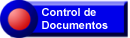
<style>
.page{position:relative;width:130px;height:38px;background:#0000ea}
.page>*{position:absolute;margin:0}
.t1{font:11px "Arial-BoldMT";color:#ffffff}
</style>
<div class="page">
<p class="t1" style="left:42px;top:8px;width:66px;height:21px">Control de Documentos</p>
</div>
